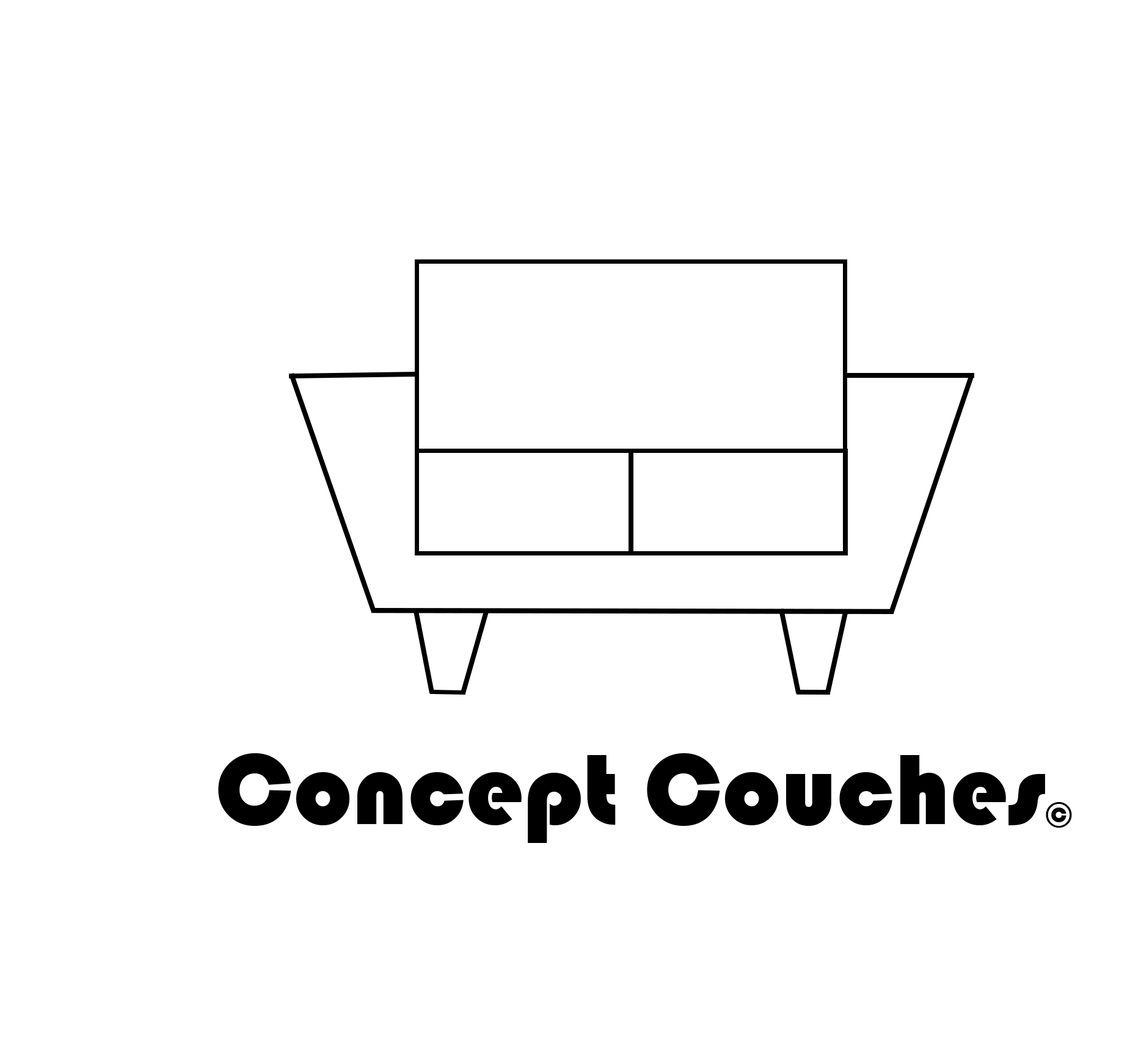
<style>
.page{position:relative;width:1141px;height:1045px;background:#ffffff}
.page>*{position:absolute;margin:0}
.t1{font:103.8px "Bauhaus93";color:#000000}
.t2{font:36.6px "Bauhaus93";color:#000000}
</style>
<div class="page">
<p class="t1" style="left:218px;top:754px;width:827px;height:89px">Concept Couches</p>
<p class="t2" style="left:1045px;top:802px;width:27px;height:26px">©</p>
</div>
